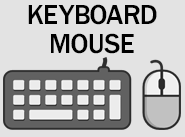
<style>
.page{position:relative;width:185px;height:137px;background:#e3e3e3}
.page>*{position:absolute;margin:0}
.t1{font:24px "OPTIFranklinGothic-Medium";color:#000000}
</style>
<div class="page">
<p class="t1" style="left:28px;top:4px;width:129px;height:50px;text-align:center">KEYBOARD<br>MOUSE</p>
</div>
